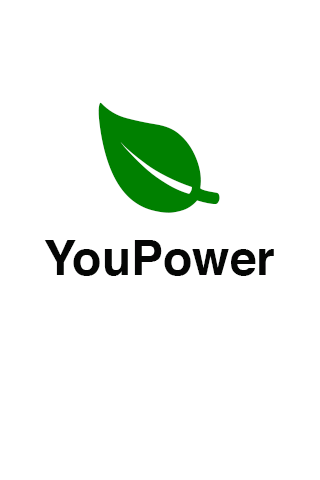
<style>
.page{position:relative;width:320px;height:480px;background:#ffffff}
.page>*{position:absolute;margin:0}
.t1{font:48px "Helvetica-Bold";color:#050605}
</style>
<div class="page">
<p class="t1" style="left:44px;top:240px;width:230px;height:36px">YouPower</p>
</div>
